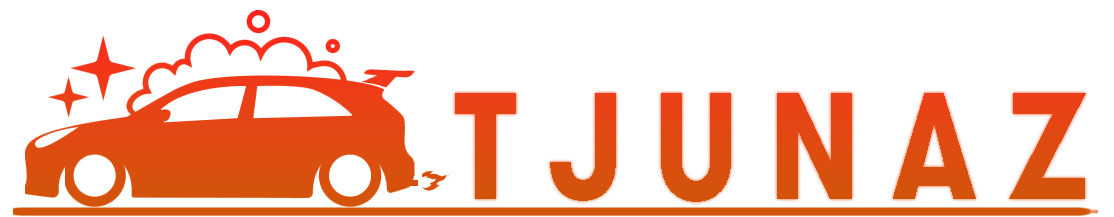
<style>
.page{position:relative;width:1114px;height:217px;background:#ffffff}
.page>*{position:absolute;margin:0}
.t1{font:151.9px "GTWalsheimProBold";letter-spacing:0.24em;color:#de4c11;scale:0.84 1}
</style>
<div class="page">
<p class="t1" style="left:455px;top:93px;width:631px;height:109px">TJUNAZ</p>
</div>
